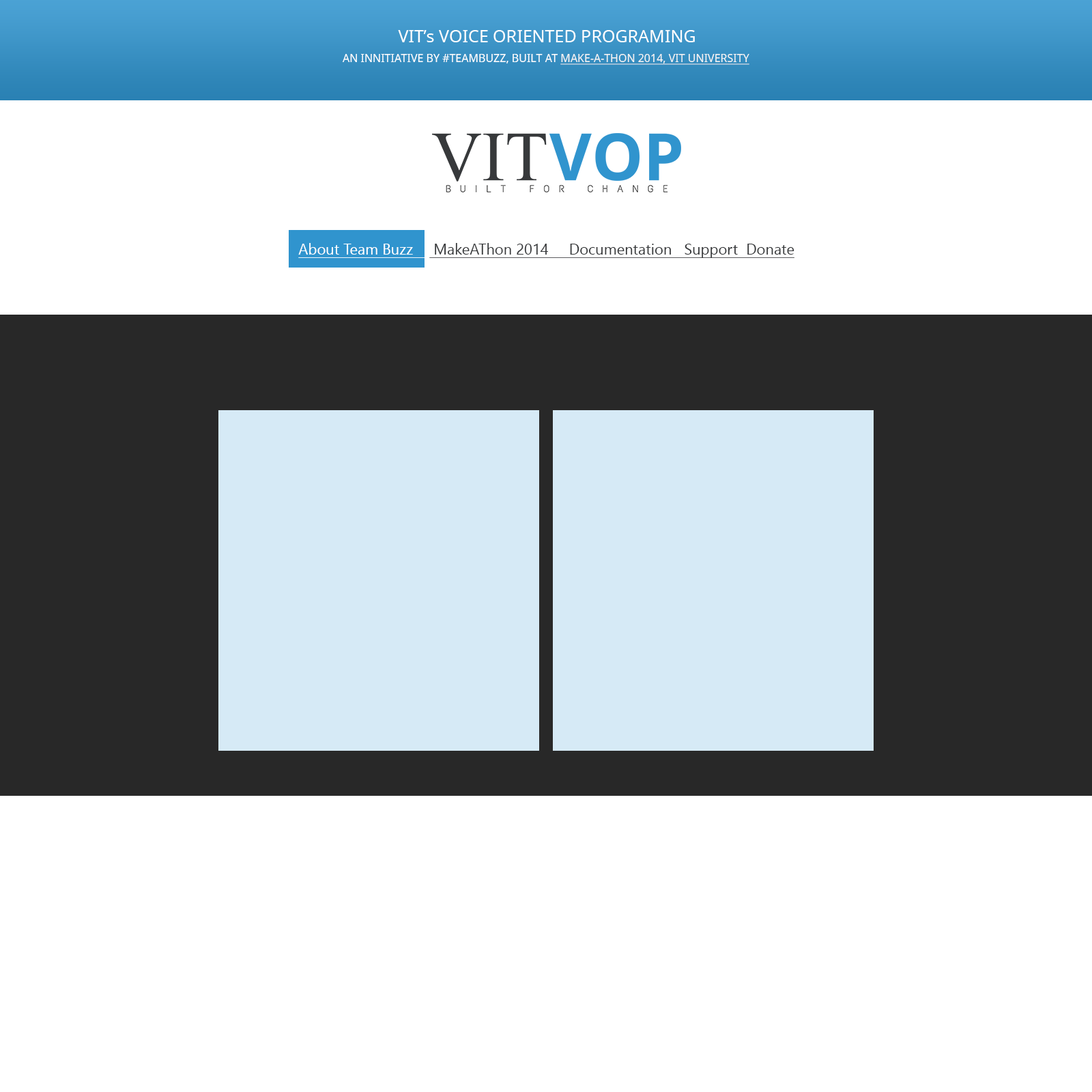
<style>
.page{position:relative;width:1092px;height:1092px;background:#ffffff}
.page>*{position:absolute;margin:0}
.t1{font:17.1px "NotoSans";color:#ffffff}
.t2{font:10.9px "NotoSans";color:#ffffff;text-transform:uppercase}
.t3{font:10.9px "NotoSans";color:#f4f4f4;text-transform:uppercase;text-decoration:underline}
.t4{font:15px "NirmalaUI";color:#37393b;text-decoration:underline}
.t5{font:15px "NirmalaUI";color:#ffffff;text-decoration:underline}
</style>
<div class="page">
<p class="t1" style="left:398px;top:30px;width:297px;height:12px">VIT’s VOICE ORIENTED PROGRAMING</p>
<p class="t2" style="left:343px;top:54px;width:406px;height:11px">an innitiative by #TeamBuzz, built at <span class="t3">make-a-Thon 2014, VIT university</span></p>
<p class="t4" style="left:298px;top:243px;width:496px;height:15px"><span class="t5">About Team Buzz    </span> MakeAThon 2014     Documentation   Support  Donate</p>
</div>
